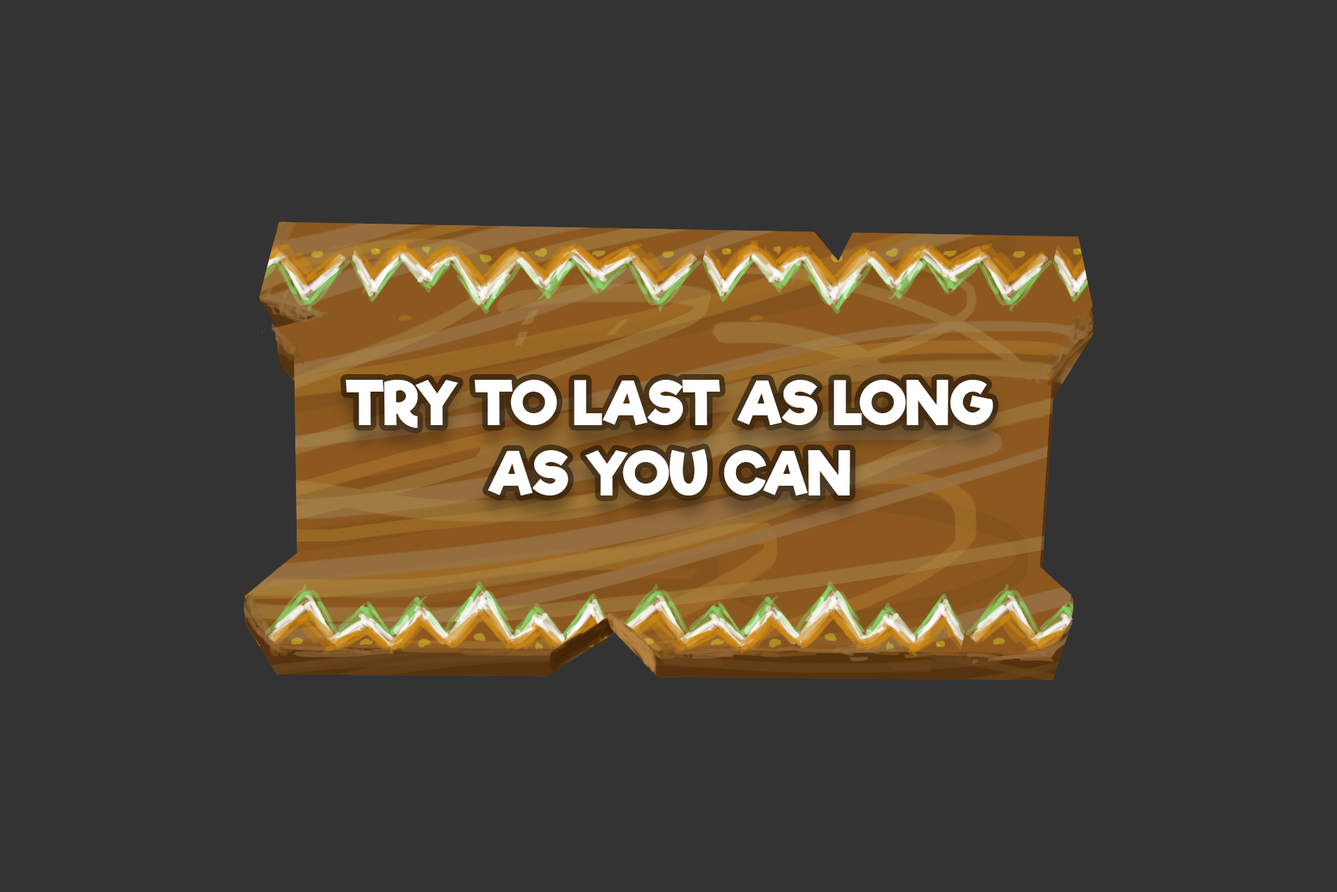
<style>
.page{position:relative;width:1337px;height:892px;background:#333333}
.page>*{position:absolute;margin:0}
.t1{font:58.5px "RifficFree-Bold";color:#ffffff}
</style>
<div class="page">
<p class="t1" style="left:345px;top:380px;width:648px;height:115px;text-align:center">TRY TO LAST AS LONG<br>AS YOU CAN</p>
</div>
